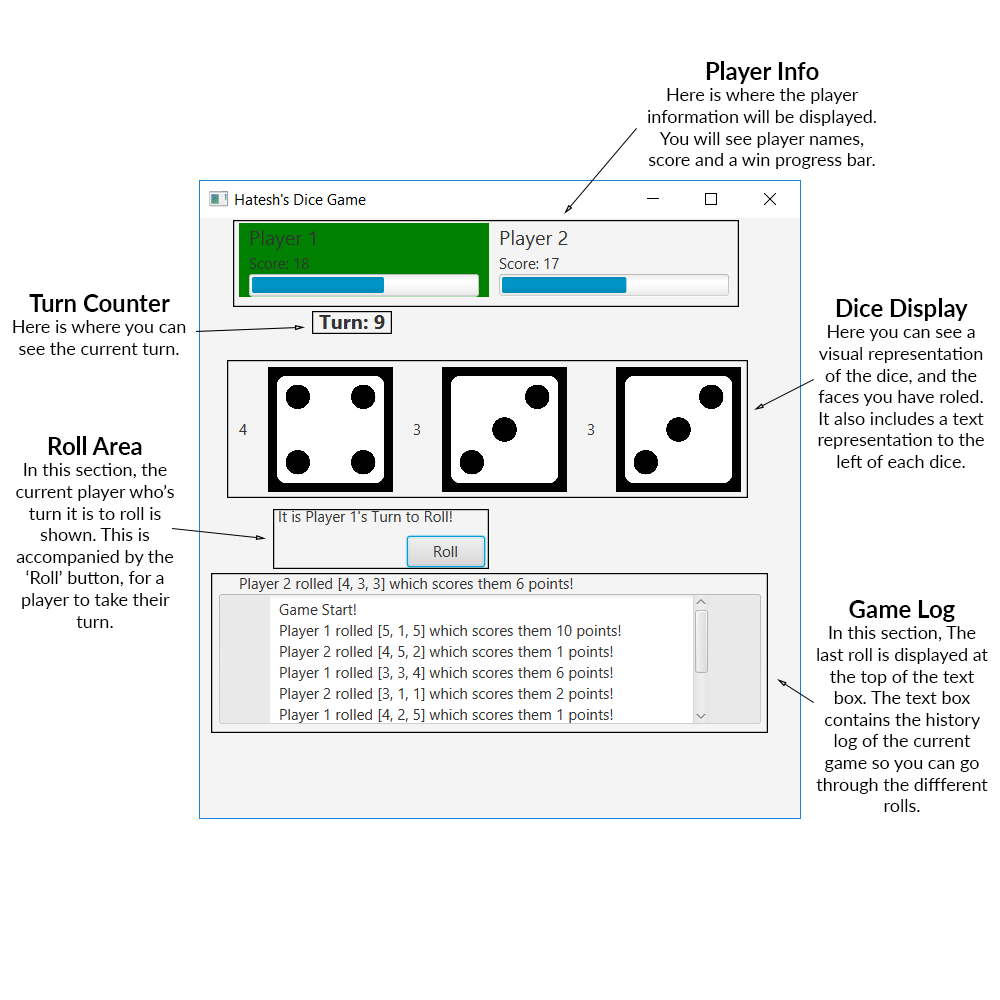
<style>
.page{position:relative;width:1000px;height:1000px;background:#ffffff}
.page>*{position:absolute;margin:0}
.t1{font:18px "Lato-Regular";color:#000000}
.t2{font:24px "Lato-Bold";color:#000000}
</style>
<div class="page">
<p class="t1" style="left:648px;top:61px;width:228px;height:108px;text-align:center"><span class="t2">Player Info<br></span>Here is where the player information will be displayed. You will see player names, score and a win progress bar.</p>
<p class="t1" style="left:13px;top:294px;width:173px;height:61px;text-align:center"><span class="t2">Turn Counter<br></span>Here is where you can see the current turn.</p>
<p class="t1" style="left:818px;top:298px;width:166px;height:170px;text-align:center"><span class="t2">Dice Display<br></span>Here you can see a visual representation of the dice, and the faces you have roled. It also includes a text representation to the left of each dice.</p>
<p class="t1" style="left:16px;top:436px;width:158px;height:192px;text-align:center"><span class="t2">Roll Area<br></span>In this section, the current player who’s turn it is to roll is shown. This is accompanied by the ‘Roll’ button, for a player to take their turn.</p>
<p class="t1" style="left:816px;top:600px;width:172px;height:212px;text-align:center"><span class="t2">Game Log<br></span>In this section, The last roll is displayed at the top of the text box. The text box contains the history log of the current game so you can go through the diffferent rolls.</p>
</div>
